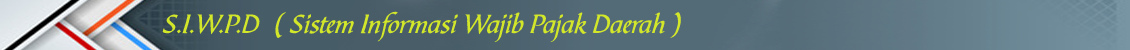
<style>
.page{position:relative;width:1130px;height:50px}
.page>*{position:absolute;margin:0}
.t1{font:27.5px "BibleScrT";color:#d3e72a}
</style>
<div class="page">
<p class="t1" style="left:162px;top:11px;width:519px;height:31px">S.I.W.P.D  ( Sistem Informasi Wajib Pajak Daerah )</p>
</div>
